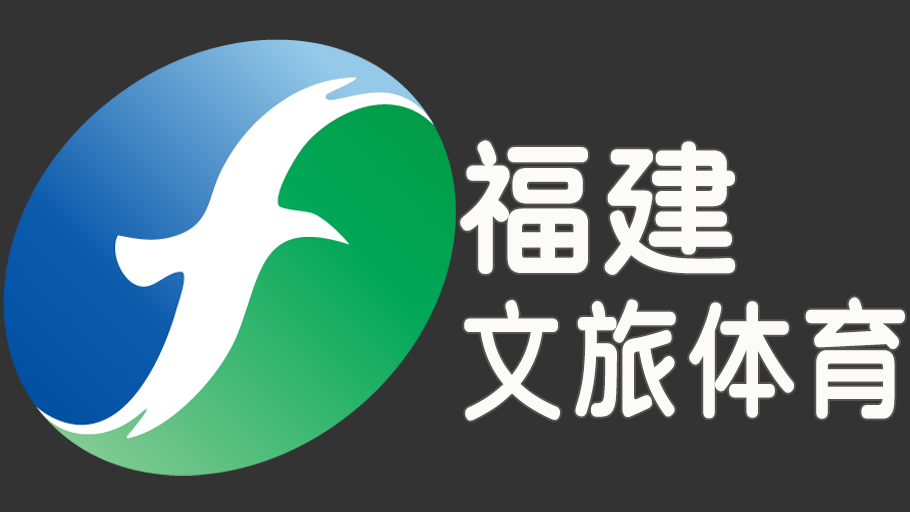
<style>
.page{position:relative;width:910px;height:512px;background:#333333}
.page>*{position:absolute;margin:0}
.t1{font:132px/160px "SJyuantijian-C-Regular";letter-spacing:0.02em;color:#fcfbf9;scale:0.85 1}
.t2{font:150px/160px "SJyuantijian-C-Regular";letter-spacing:0.02em;color:#fcfbf9;scale:0.95 1}
</style>
<div class="page">
<p class="t1" style="left:460px;top:140px;width:445px;height:281px"><span class="t2">福建<br></span>文旅体育</p>
</div>
